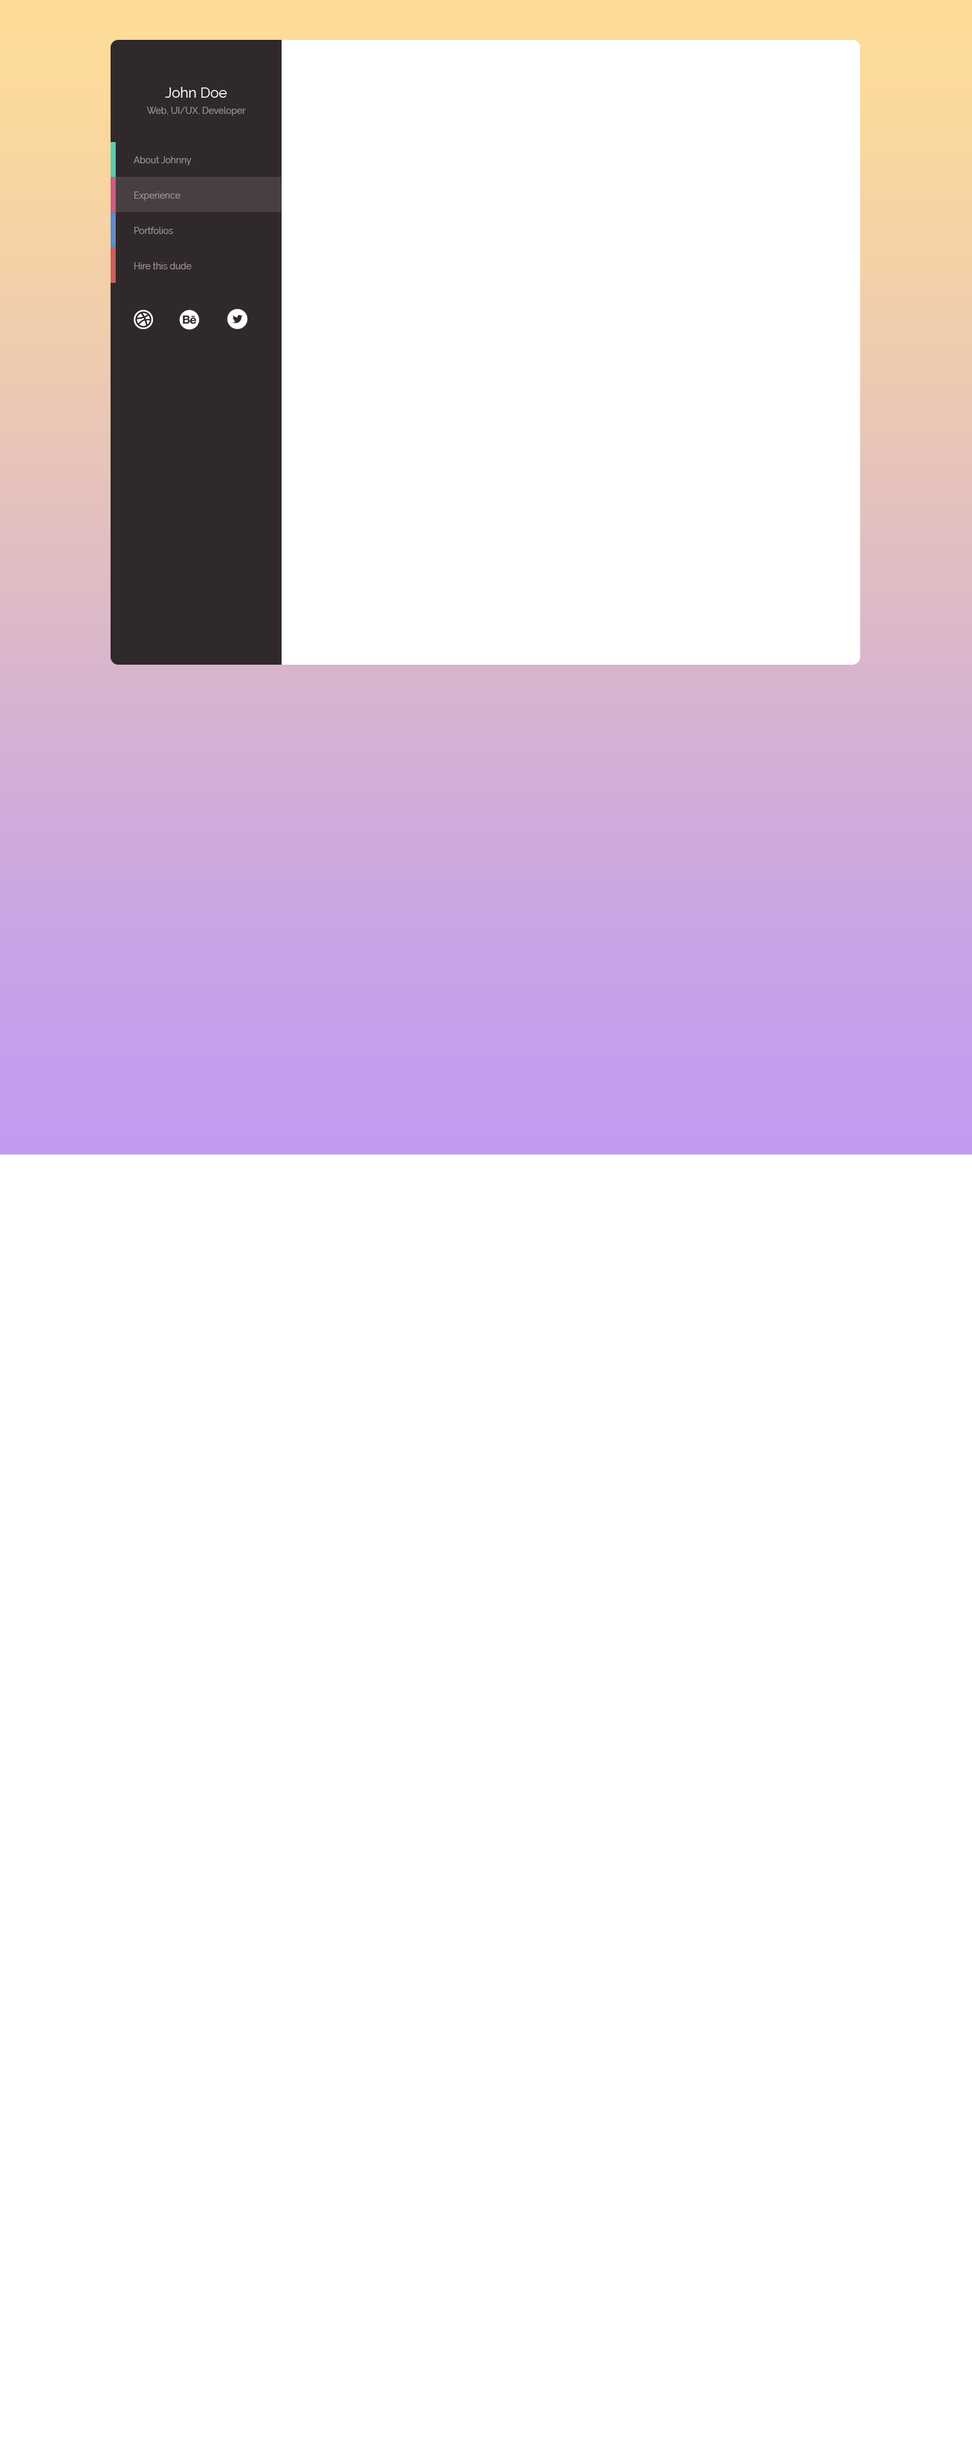
<style>
.page{position:relative;width:972px;height:2453px;background:#ffffff}
.page>*{position:absolute;margin:0}
.t1{font:14.1px "Raleway-Regular";color:#ffffff}
.t2{font:9px "Raleway-Regular";color:#a2979a}
.t3{font:9px/35.4px "Raleway-Regular";color:#a2979a}
</style>
<div class="page">
<p class="t1" style="left:165px;top:87px;width:62px;height:11px">John Doe</p>
<p class="t2" style="left:147px;top:107px;width:99px;height:9px">Web, UI/UX, Developer</p>
<p class="t3" style="left:134px;top:156px;width:58px;height:113px">About Johnny<br>Experience<br>Portfolios<br>Hire this dude</p>
</div>
